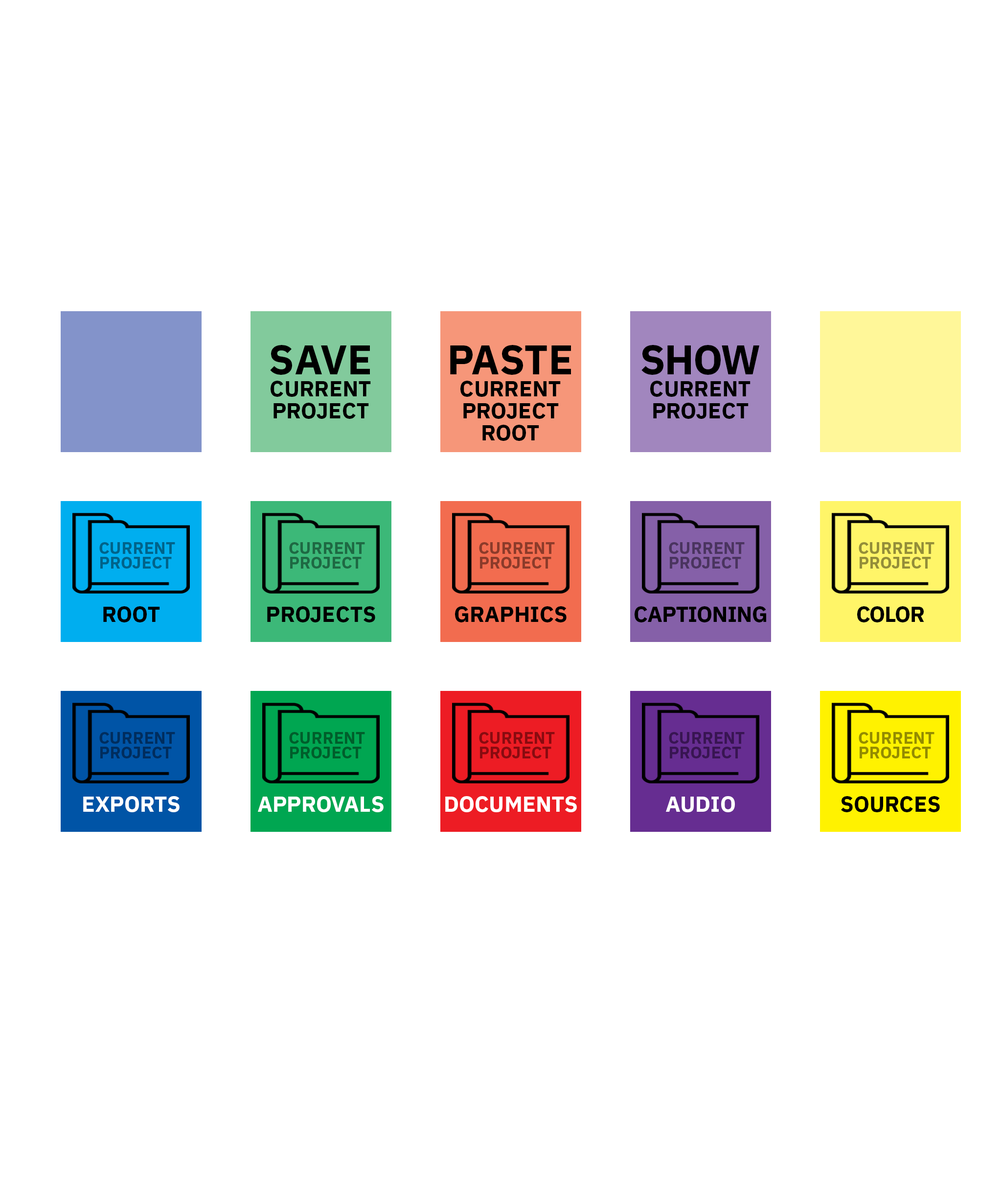
<style>
.page{position:relative;width:1002px;height:1190px;background:#ffffff}
.page>*{position:absolute;margin:0}
.t1{font:22px/22px "IBMPlexSans-Bold";color:#000000;text-transform:uppercase}
.t2{font:41.1px/22px "IBMPlexSans-Bold";color:#000000;text-transform:uppercase}
.t3{font:41.1px/22px "IBMPlexSans-Bold";letter-spacing:-0.025em;color:#000000;text-transform:uppercase}
.t4{font:16.6px/14.7px "IBMPlexSans-Bold";color:#00638a;text-transform:uppercase}
.t5{font:16.6px/14.7px "IBMPlexSans-Bold";color:#1e6943;text-transform:uppercase}
.t6{font:16.6px/14.7px "IBMPlexSans-Bold";color:#8c3b2a;text-transform:uppercase}
.t7{font:16.6px/14.7px "IBMPlexSans-Bold";color:#4a345f;text-transform:uppercase}
.t8{font:16.6px/14.7px "IBMPlexSans-Bold";color:#948e39;text-transform:uppercase}
.t9{font:22px "IBMPlexSans-Bold";color:#000000;text-transform:uppercase}
.t10{font:22px "IBMPlexSans-Bold";letter-spacing:-0.025em;color:#000000;text-transform:uppercase}
.t11{font:16.6px/14.7px "IBMPlexSans-Bold";color:#002d5e;text-transform:uppercase}
.t12{font:16.6px/14.7px "IBMPlexSans-Bold";color:#005e2b;text-transform:uppercase}
.t13{font:16.6px/14.7px "IBMPlexSans-Bold";color:#890b10;text-transform:uppercase}
.t14{font:16.6px/14.7px "IBMPlexSans-Bold";color:#381552;text-transform:uppercase}
.t15{font:16.6px/14.7px "IBMPlexSans-Bold";color:#948c00;text-transform:uppercase}
.t16{font:22px "IBMPlexSans-Bold";color:#ffffff;text-transform:uppercase}
</style>
<div class="page">
<p class="t1" style="left:270px;top:345px;width:101px;height:74px;text-align:center"><span class="t2">SAVE<br></span>CURRENT<br>PROJECT</p>
<p class="t1" style="left:450px;top:345px;width:121px;height:96px;text-align:center"><span class="t2">PASTE<br></span>CURRENT<br>PROJECT<br>ROOT</p>
<p class="t1" style="left:641px;top:345px;width:118px;height:74px;text-align:center"><span class="t3">Show<br></span>CURRENT<br>PROJECT</p>
<p class="t4" style="left:99px;top:542px;width:76px;height:27px">current<br>project</p>
<p class="t5" style="left:289px;top:542px;width:76px;height:27px">current<br>project</p>
<p class="t6" style="left:479px;top:542px;width:76px;height:27px">current<br>project</p>
<p class="t7" style="left:669px;top:542px;width:76px;height:27px">current<br>project</p>
<p class="t8" style="left:859px;top:542px;width:76px;height:27px">current<br>project</p>
<p class="t9" style="left:103px;top:606px;width:57px;height:16px">root</p>
<p class="t9" style="left:267px;top:606px;width:108px;height:16px">PROJECTS</p>
<p class="t9" style="left:455px;top:606px;width:112px;height:16px">graphics</p>
<p class="t10" style="left:635px;top:606px;width:131px;height:16px">captioning</p>
<p class="t10" style="left:857px;top:606px;width:67px;height:16px">color</p>
<p class="t11" style="left:99px;top:732px;width:76px;height:26px">current<br>project</p>
<p class="t12" style="left:289px;top:732px;width:76px;height:26px">current<br>project</p>
<p class="t13" style="left:479px;top:732px;width:76px;height:26px">current<br>project</p>
<p class="t14" style="left:669px;top:732px;width:76px;height:26px">current<br>project</p>
<p class="t15" style="left:859px;top:732px;width:76px;height:26px">current<br>project</p>
<p class="t16" style="left:83px;top:796px;width:97px;height:16px">exports</p>
<p class="t16" style="left:258px;top:796px;width:126px;height:16px">approvals</p>
<p class="t16" style="left:445px;top:796px;width:132px;height:16px">documents</p>
<p class="t16" style="left:666px;top:796px;width:69px;height:16px">audio</p>
<p class="t9" style="left:841px;top:796px;width:99px;height:16px">sources</p>
</div>
